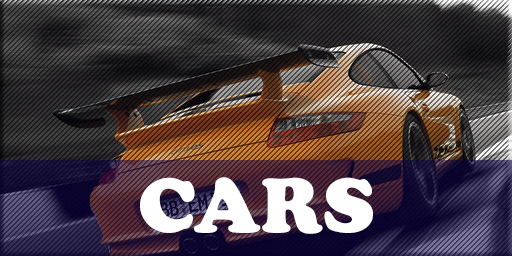
<style>
.page{position:relative;width:512px;height:256px}
.page>*{position:absolute;margin:0}
.t1{font:80px "CooperBlack";color:#ffffff}
</style>
<div class="page">
<p class="t1" style="left:140px;top:177px;width:233px;height:57px">CARS</p>
</div>
